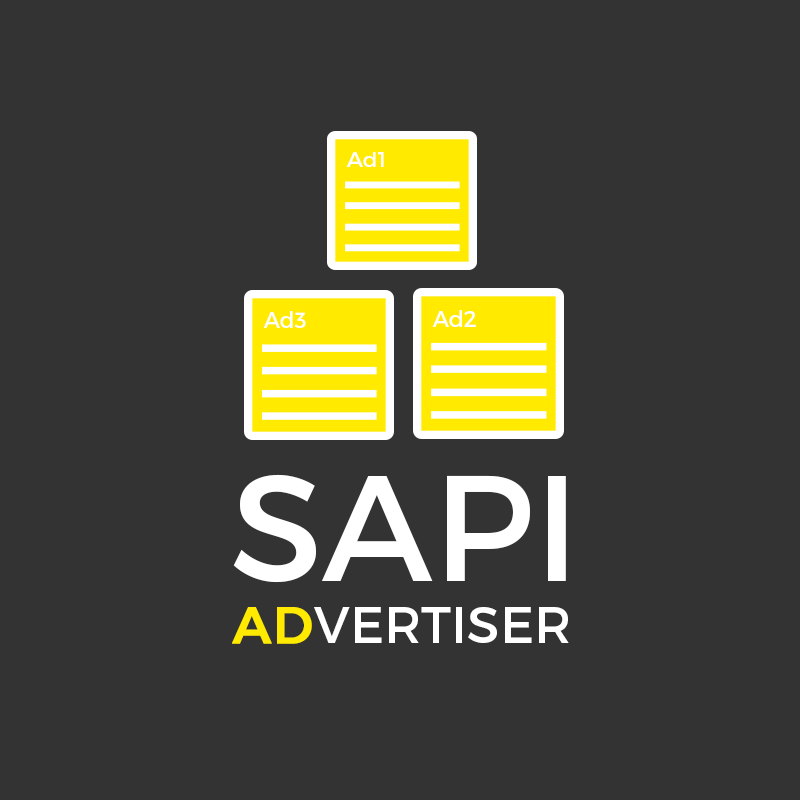
<style>
.page{position:relative;width:800px;height:800px;background:#333333}
.page>*{position:absolute;margin:0}
.t1{font:20.3px "Montserrat-Regular";color:#ffffff;scale:1.09 1}
.t2{font:21.9px "Montserrat-Regular";color:#ffffff}
.t3{font:22.1px "Montserrat-Regular";color:#ffffff}
.t4{font:149.9px "Montserrat-Regular";color:#ffffff}
.t5{font:51.8px "Montserrat-Regular";color:#ffffff}
.t6{font:51.8px "Montserrat-Regular";color:#ffea00;font-weight:bold}
</style>
<div class="page">
<p class="t1" style="left:346px;top:152px;width:38px;height:15px">Ad1</p>
<p class="t2" style="left:263px;top:311px;width:43px;height:17px">Ad3</p>
<p class="t3" style="left:432px;top:310px;width:44px;height:17px">Ad2</p>
<p class="t4" style="left:233px;top:474px;width:333px;height:109px">SAPI</p>
<p class="t5" style="left:232px;top:607px;width:337px;height:37px"><span class="t6">AD</span>VERTISER</p>
</div>
